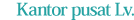
<style>
.page{position:relative;width:134px;height:20px;background:#ffffff}
.page>*{position:absolute;margin:0}
.t1{font:18px "HeiseiMinStd-W7";letter-spacing:-0.04em;color:#25a2a2}
</style>
<div class="page">
<p class="t1" style="left:16px;top:2px;width:118px;height:18px">Kantor pusat Lv.</p>
</div>
